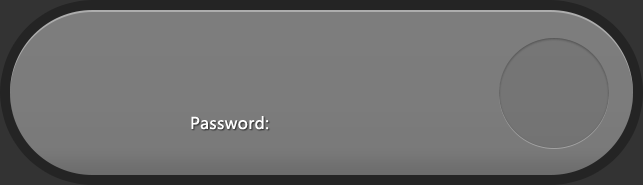
<style>
.page{position:relative;width:643px;height:185px;background:#7c7c7c}
.page>*{position:absolute;margin:0}
.t1{font:16px "MicrosoftYaHei";letter-spacing:0.02em;color:#ffffff}
</style>
<div class="page">
<p class="t1" style="left:191px;top:116px;width:78px;height:14px">Password:</p>
</div>
